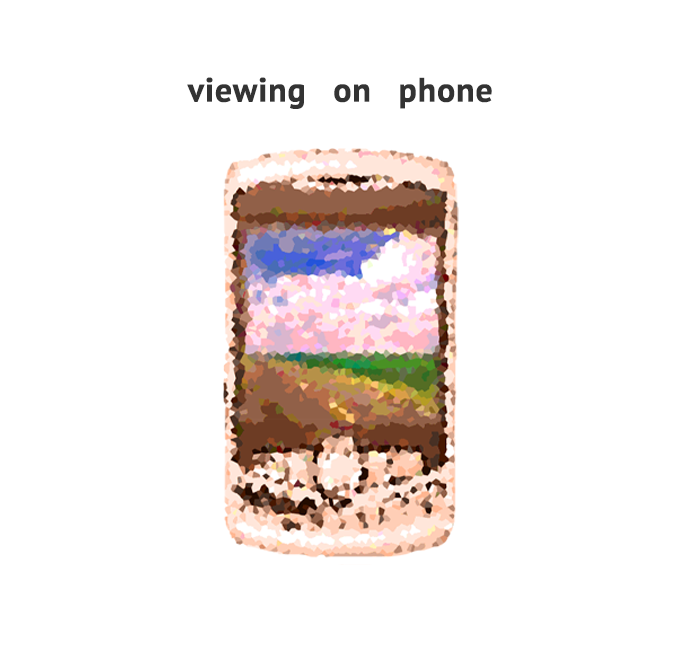
<style>
.page{position:relative;width:692px;height:657px;background:#ffffff}
.page>*{position:absolute;margin:0}
.t1{font:33.8px "PTSans-Bold";color:#333333;font-weight:bold}
</style>
<div class="page">
<p class="t1" style="left:187px;top:77px;width:305px;height:32px">viewing on phone</p>
</div>
